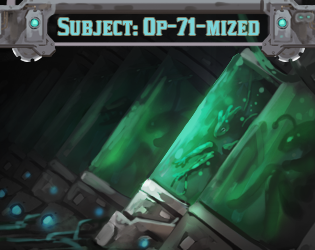
<style>
.page{position:relative;width:315px;height:250px}
.page>*{position:absolute;margin:0}
.t1{font:21.9px "KirstyRg-Regular";color:#7ad5d9}
</style>
<div class="page">
<p class="t1" style="left:58px;top:18px;width:201px;height:17px">Subject: 0p-71-mized</p>
</div>
